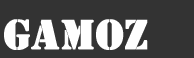
<style>
.page{position:relative;width:194px;height:58px;background:#333333}
.page>*{position:absolute;margin:0}
.t1{font:43.8px "Stencil";color:#ffffff;font-weight:bold}
</style>
<div class="page">
<p class="t1" style="left:4px;top:19px;width:144px;height:31px">Gamoz</p>
</div>
